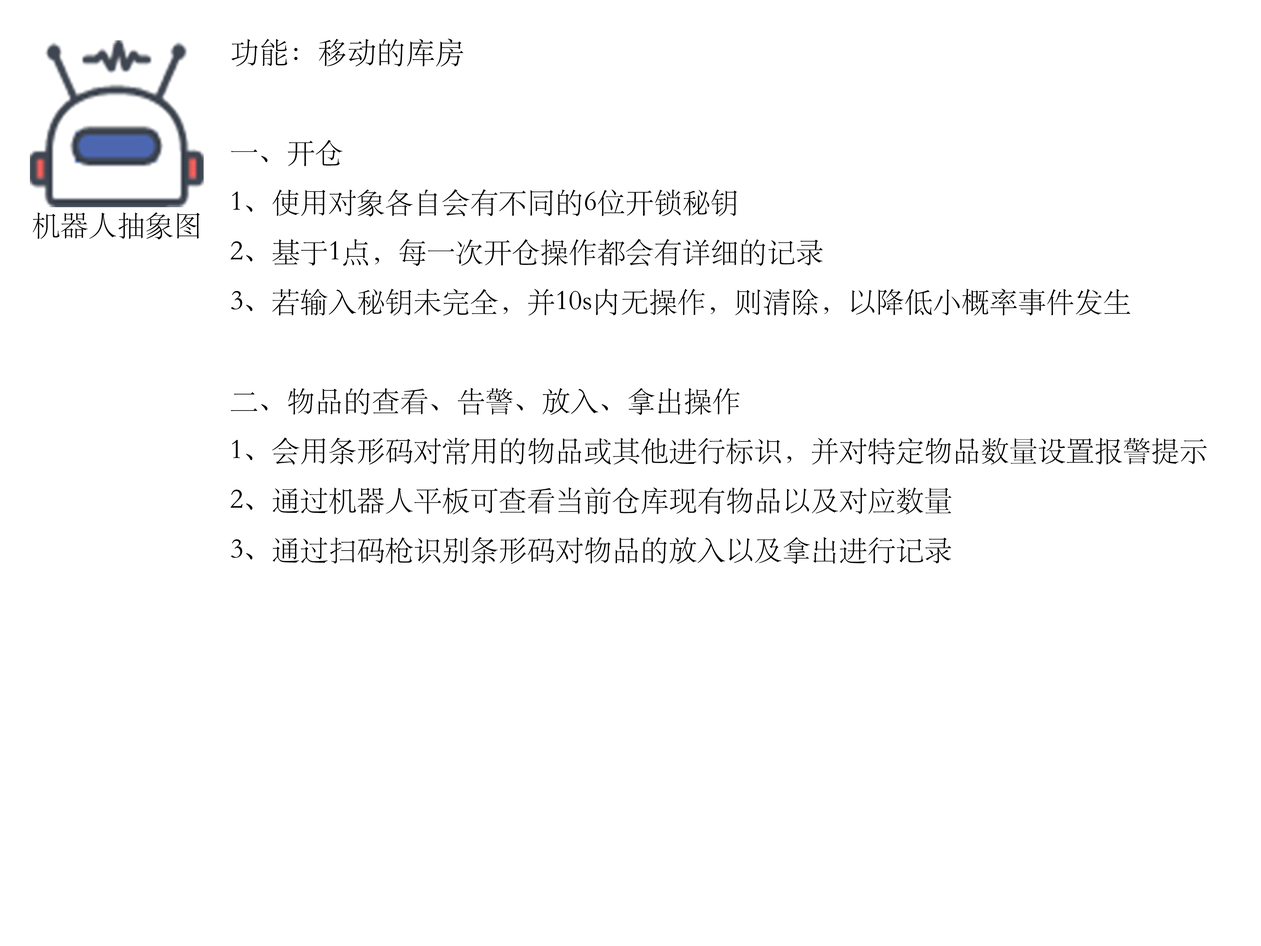
<style>
.page{position:relative;width:1261px;height:946px;background:#ffffff}
.page>*{position:absolute;margin:0}
.t1{font:28.4px "STSong";color:#030303}
.t2{font:29.3px "STSong";color:#030303}
</style>
<div class="page">
<p class="t1" style="left:230px;top:38px;width:977px;height:526px"><span class="t2">功能：移动的库房<br></span><br>一、开仓<br>1、使用对象各自会有不同的6位开锁秘钥<br>2、基于1点，每一次开仓操作都会有详细的记录<br>3、若输入秘钥未完全，并10s内无操作，则清除，以降低小概率事件发生<br><br>二、物品的查看、告警、放入、拿出操作<br>1、会用条形码对常用的物品或其他进行标识，并对特定物品数量设置报警提示<br>2、通过机器人平板可查看当前仓库现有物品以及对应数量<br>3、通过扫码枪识别条形码对物品的放入以及拿出进行记录</p>
<p class="t1" style="left:33px;top:212px;width:167px;height:28px">机器人抽象图</p>
</div>
